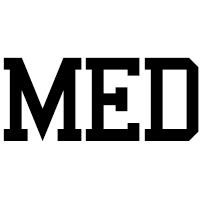
<style>
.page{position:relative;width:200px;height:200px;background:#ffffff}
.page>*{position:absolute;margin:0}
.t1{font:121.9px "College";letter-spacing:-0.06em;color:#000000}
</style>
<div class="page">
<p class="t1" style="left:3px;top:57px;width:196px;height:84px">MED</p>
</div>
